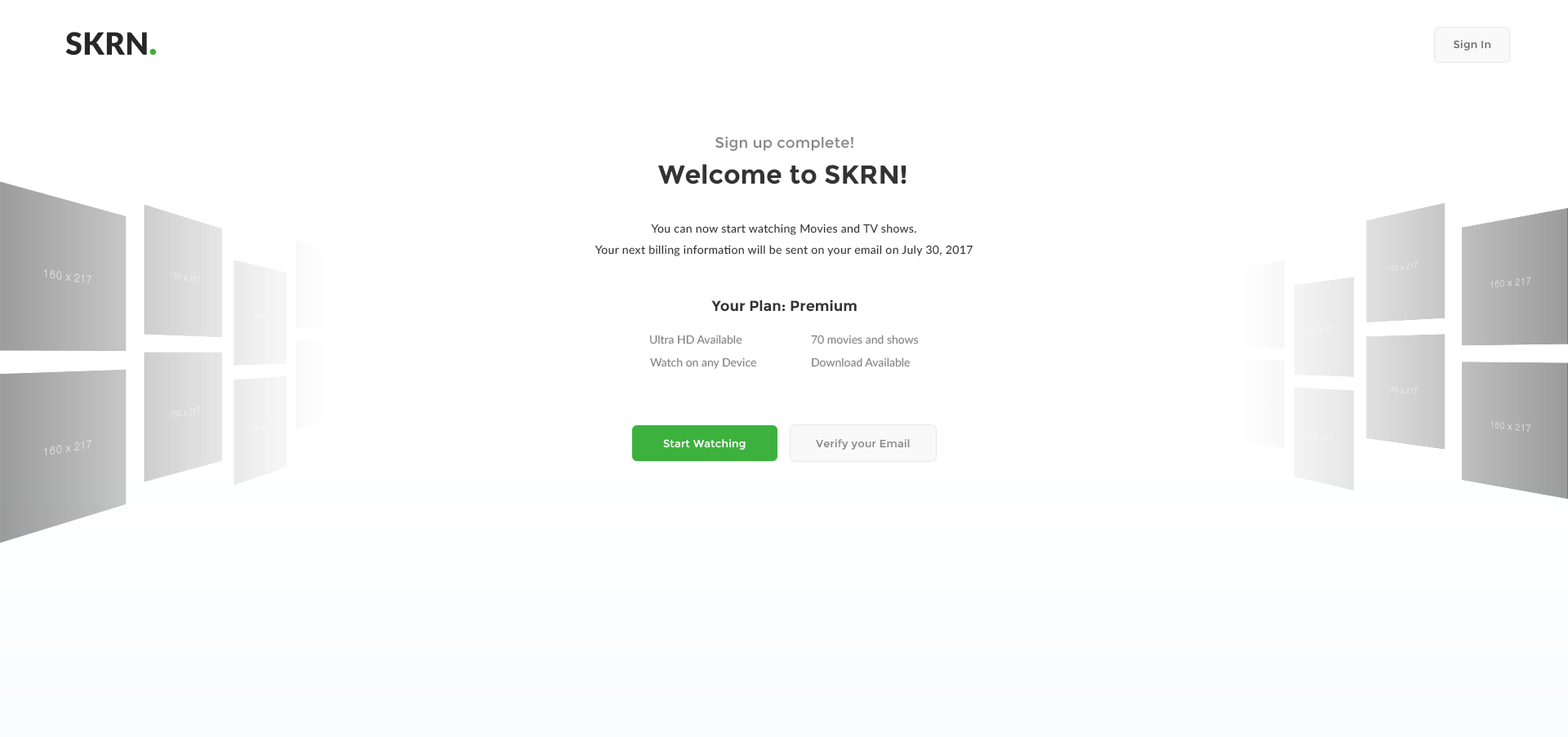
<style>
.page{position:relative;width:1568px;height:737px;background:#ffffff}
.page>*{position:absolute;margin:0}
.t1{font:30.8px "Lato-Black";color:#272727}
.t2{font:35.9px "Lato-Black";color:#3db13d}
.t3{font:10.6px "Montserrat-Regular";letter-spacing:0.02em;color:#666666}
.t4{font:14.7px "Montserrat-Regular";letter-spacing:0.017em;color:#848484}
.t5{font:26.1px "Montserrat-Bold";color:#333333}
.t6{font:11.4px/21.2px "Lato-Regular";letter-spacing:0.025em;color:#333333}
.t7{font:14.7px "Montserrat-Bold";color:#333333}
.t8{font:11.4px "Lato-Regular";color:#848484}
.t9{font:10.6px "Montserrat-Regular";letter-spacing:0.02em;color:#ffffff}
.t10{font:10.6px "Montserrat-Regular";letter-spacing:0.02em;color:#858585}
</style>
<div class="page">
<p class="t1" style="left:65px;top:32px;width:92px;height:24px">SKRN<span class="t2">.</span></p>
<p class="t3" style="left:1454px;top:40px;width:37px;height:11px">Sign In</p>
<p class="t4" style="left:715px;top:136px;width:138px;height:15px">Sign up complete!</p>
<p class="t5" style="left:658px;top:164px;width:248px;height:21px">Welcome to SKRN!</p>
<p class="t6" style="left:595px;top:224px;width:378px;height:32px;text-align:center">You can now start watching Movies and TV shows.<br>Your next billing information will be sent on your email on July 30, 2017</p>
<p class="t7" style="left:711px;top:300px;width:146px;height:12px">Your Plan: Premium</p>
<p class="t8" style="left:650px;top:335px;width:92px;height:10px">Ultra HD Available</p>
<p class="t8" style="left:811px;top:335px;width:108px;height:10px">70 movies and shows</p>
<p class="t8" style="left:650px;top:358px;width:106px;height:11px">Watch on any Device</p>
<p class="t8" style="left:812px;top:358px;width:98px;height:10px">Download Available</p>
<p class="t9" style="left:663px;top:439px;width:83px;height:11px">Start Watching</p>
<p class="t10" style="left:816px;top:439px;width:94px;height:11px">Verify your Email</p>
</div>
